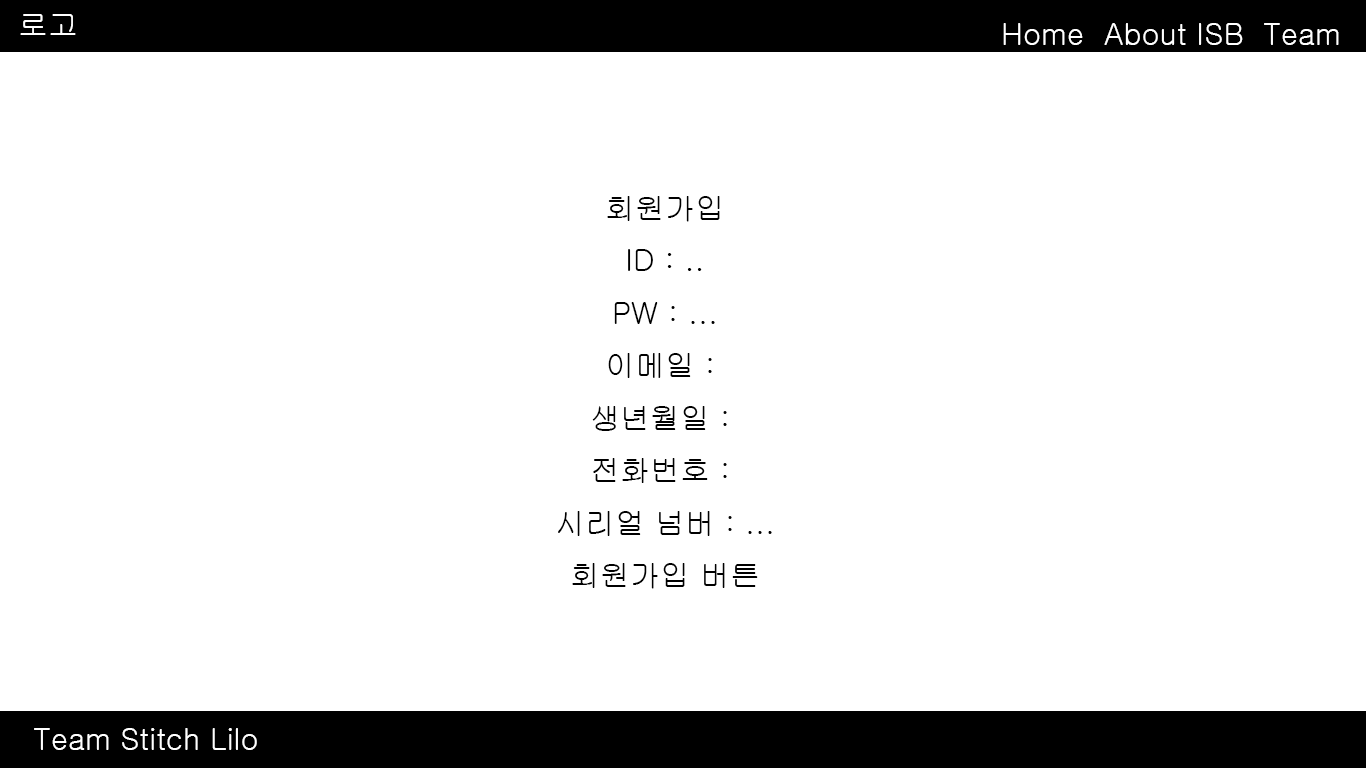
<style>
.page{position:relative;width:1366px;height:768px;background:#ffffff}
.page>*{position:absolute;margin:0}
.t1{font:30px "Gulim";color:#ffffff}
.t2{font:30px "Gulim";color:#000000}
</style>
<div class="page">
<p class="t1" style="left:20px;top:14px;width:56px;height:21px">로고</p>
<p class="t1" style="left:1003px;top:23px;width:336px;height:22px">Home  About ISB  Team</p>
<p class="t2" style="left:558px;top:196px;width:214px;height:393px;text-align:center">회원가입<br>ID : ..<br>PW : ...<br>이메일 : <br>생년월일 : <br>전화번호 : <br>시리얼 넘버 : ...<br>회원가입 버튼</p>
<p class="t1" style="left:34px;top:728px;width:223px;height:22px">Team Stitch Lilo</p>
</div>
